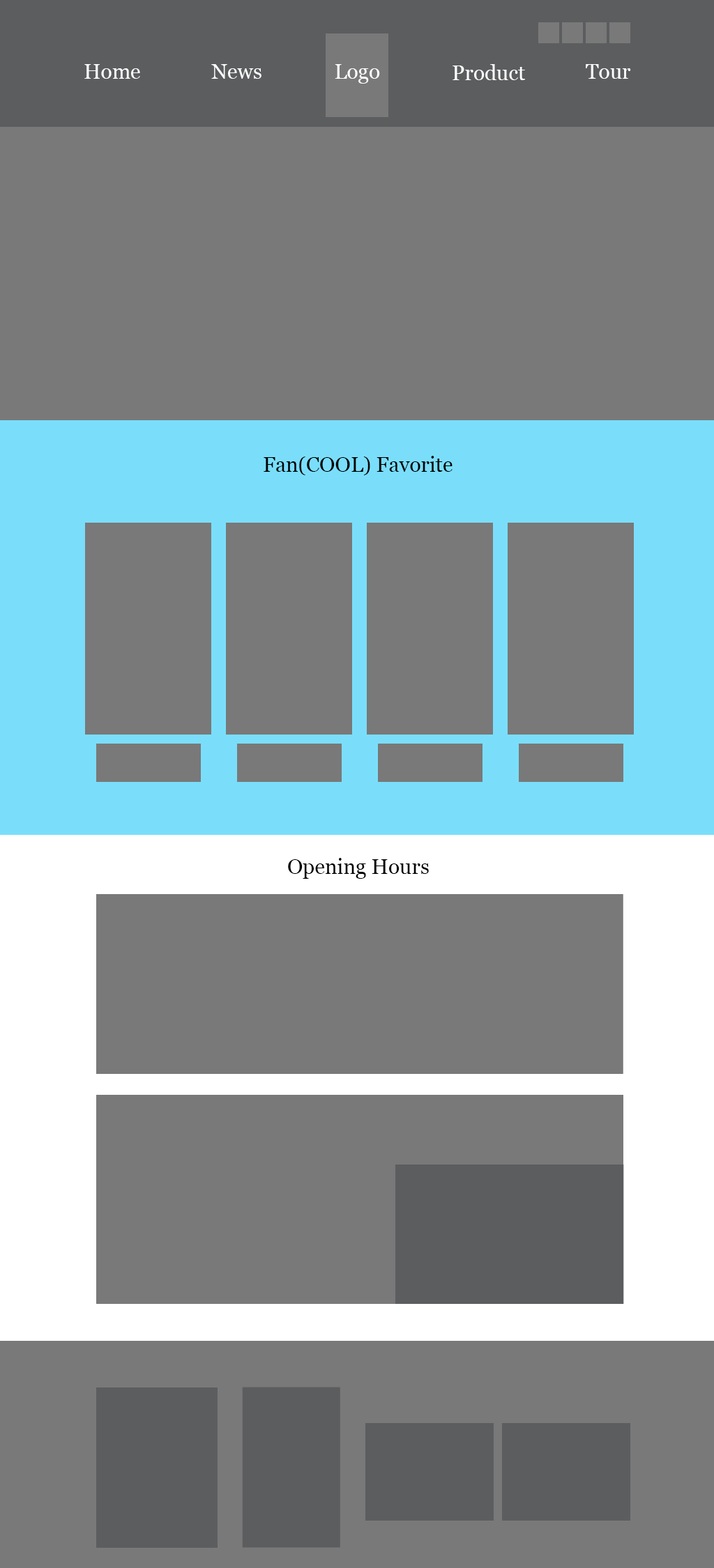
<style>
.page{position:relative;width:714px;height:1568px;background:#797979}
.page>*{position:absolute;margin:0}
.t1{font:20.9px "Georgia";color:#ffffff}
.t2{font:20.9px "Georgia";color:#010101}
</style>
<div class="page">
<p class="t1" style="left:84px;top:64px;width:56px;height:15px">Home</p>
<p class="t1" style="left:211px;top:64px;width:50px;height:15px">News</p>
<p class="t1" style="left:335px;top:64px;width:45px;height:20px">Logo</p>
<p class="t1" style="left:452px;top:64px;width:73px;height:16px">Product</p>
<p class="t1" style="left:585px;top:64px;width:46px;height:15px">Tour</p>
<p class="t2" style="left:263px;top:456px;width:189px;height:19px">Fan(COOL) Favorite</p>
<p class="t2" style="left:288px;top:858px;width:141px;height:21px">Opening Hours</p>
</div>
